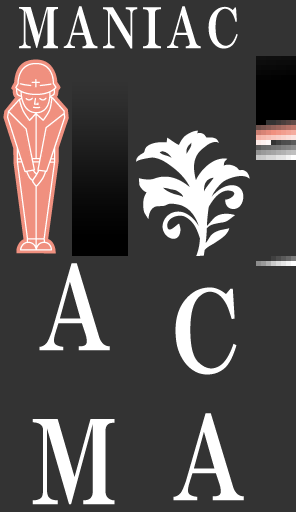
<style>
.page{position:relative;width:296px;height:512px;background:#333333}
.page>*{position:absolute;margin:0}
.t1{font:55px "HGPMinchoE";letter-spacing:0.075em;color:#ffffff}
.t2{font:114.4px "HGPMinchoE";letter-spacing:0.075em;color:#ffffff}
</style>
<div class="page">
<p class="t1" style="left:19px;top:6px;width:219px;height:43px">MANIAC</p>
<p class="t2" style="left:39px;top:263px;width:71px;height:88px">A</p>
<p class="t2" style="left:175px;top:287px;width:62px;height:88px">C</p>
<p class="t2" style="left:173px;top:413px;width:71px;height:88px">A</p>
<p class="t2" style="left:32px;top:419px;width:83px;height:86px">M</p>
</div>
